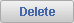
<style>
.page{position:relative;width:74px;height:23px}
.page>*{position:absolute;margin:0}
.t1{font:12px "Arial-BoldMT";color:#4466aa}
</style>
<div class="page">
<p class="t1" style="left:20px;top:7px;width:35px;height:9px">Delete</p>
</div>
